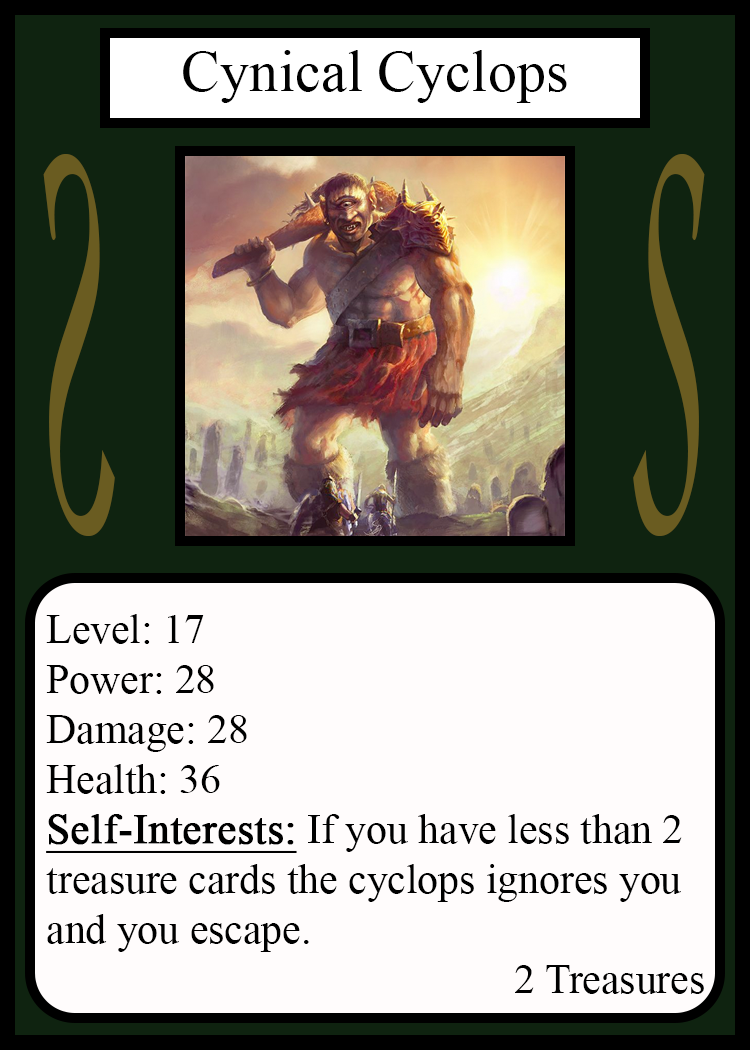
<style>
.page{position:relative;width:750px;height:1050px;background:#fffcfc}
.page>*{position:absolute;margin:0}
.t1{font:58.3px "TimesNewRomanPSMT";color:#010101}
.t2{font:548.5px "Apple-Chancery";color:#6a5c21;scale:0.27 1}
.t3{font:548.2px "Apple-Chancery";color:#6a5c21;scale:0.27 1}
.t4{font:41.7px "TimesNewRomanPSMT";color:#000000}
.t5{font:41.7px "TimesNewRomanPSMT";color:#000000;font-weight:bold;text-decoration:underline}
</style>
<div class="page">
<p class="t1" style="left:183px;top:50px;width:384px;height:53px">Cynical Cyclops</p>
<p class="t2" style="left:43px;top:154px;width:72px;height:382px;rotate:180deg">S</p>
<p class="t3" style="left:633px;top:154px;width:72px;height:382px">S</p>
<p class="t4" style="left:46px;top:614px;width:658px;height:380px">Level: 17<br>Power: 28<br>Damage: 28<br>Health: 36<br><span class="t5">Self-Interests:</span> If you have less than 2<br>treasure cards the cyclops ignores you<br>and you escape.<br>             2 Treasures</p>
</div>
